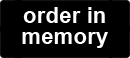
<style>
.page{position:relative;width:130px;height:58px;background:#000000}
.page>*{position:absolute;margin:0}
.t1{font:22.1px/20.8px "Arial-BoldMT";color:#ffffff}
</style>
<div class="page">
<p class="t1" style="left:22px;top:7px;width:86px;height:41px;text-align:center">order in<br>memory</p>
</div>
